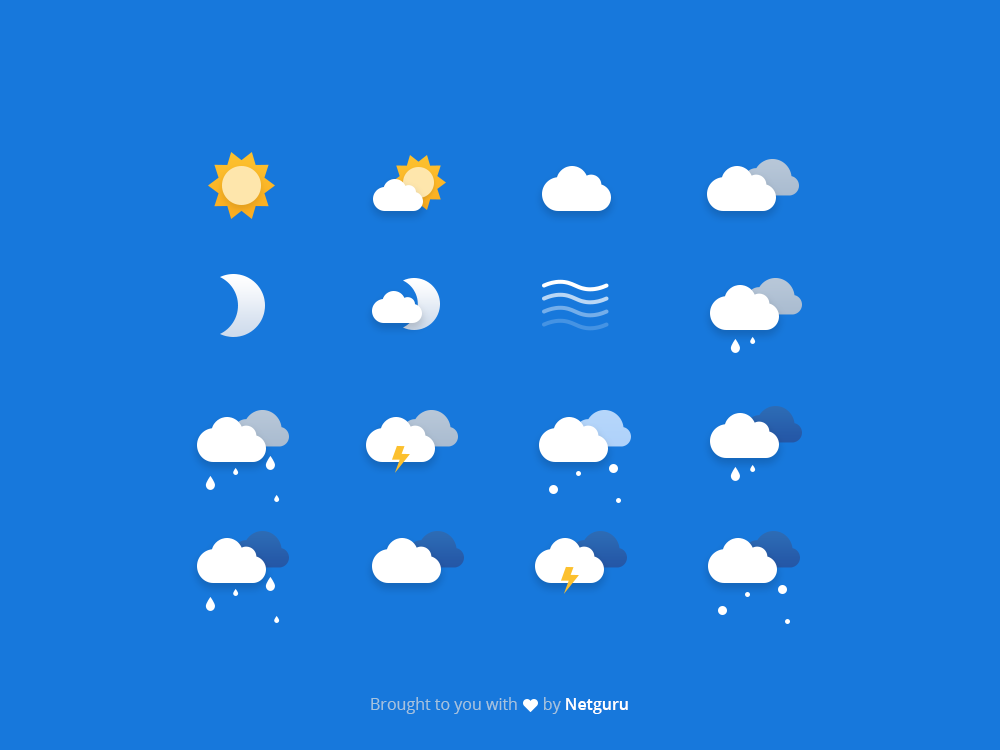
<style>
.page{position:relative;width:1000px;height:750px;background:#1778dc}
.page>*{position:absolute;margin:0}
.t1{font:16px "OpenSans";color:#a6c4dd}
.t2{font:16px "OpenSans-Semibold";color:#ffffff}
</style>
<div class="page">
<p class="t1" style="left:371px;top:697px;width:257px;height:17px">Brought to you with      by <span class="t2">Netguru</span></p>
</div>
